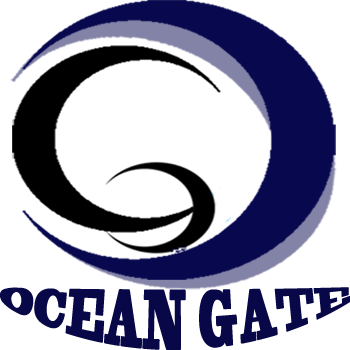
<style>
.page{position:relative;width:350px;height:350px;background:#ffffff}
.page>*{position:absolute;margin:0}
.t1{font:19px "BlackoakStd";color:#080848;scale:1.1 1}
</style>
<div class="page">
<p class="t1" style="left:0px;top:287px;width:350px;height:64px;text-align:center">OCEAN GATE</p>
</div>
